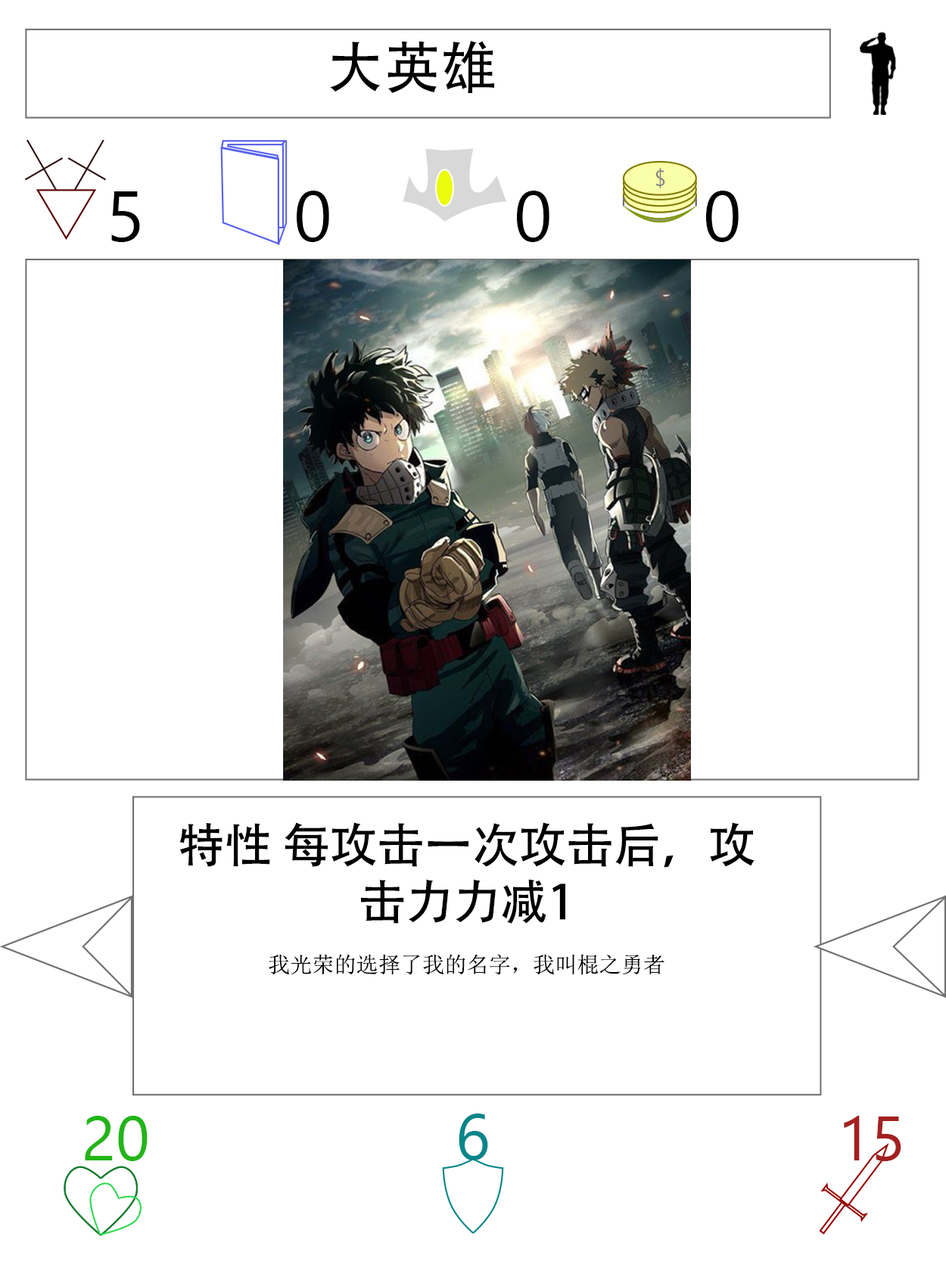
<style>
.page{position:relative;width:946px;height:1261px;background:#ffffff}
.page>*{position:absolute;margin:0}
.t1{font:56.7px "AdobeHeitiStd-Regular";color:#000000}
.t2{font:70.9px "SegoeUI";color:#000000}
.t3{font:47.3px "AdobeHeitiStd-Regular";color:#000000}
.t4{font:22.1px "NSimSun";color:#000000}
.t5{font:63px "SegoeUI";color:#22b518}
.t6{font:64.6px "SegoeUI";color:#05868a}
.t7{font:63px "SegoeUI";color:#a32020}
</style>
<div class="page">
<p class="t1" style="left:330px;top:40px;width:164px;height:53px">大英雄</p>
<p class="t2" style="left:111px;top:191px;width:29px;height:51px">5</p>
<p class="t2" style="left:297px;top:191px;width:32px;height:51px">0</p>
<p class="t2" style="left:517px;top:191px;width:32px;height:51px">0</p>
<p class="t2" style="left:706px;top:191px;width:32px;height:51px">0</p>
<p class="t3" style="left:179px;top:822px;width:575px;height:153px;text-align:center">特性 每攻击一次攻击后，攻击力力减1<br><span class="t4"><br>我光荣的选择了我的名字，我叫棍之勇者</span></p>
<p class="t5" style="left:85px;top:1116px;width:63px;height:45px">20</p>
<p class="t6" style="left:458px;top:1114px;width:30px;height:46px">6</p>
<p class="t7" style="left:843px;top:1116px;width:58px;height:45px">15</p>
</div>
